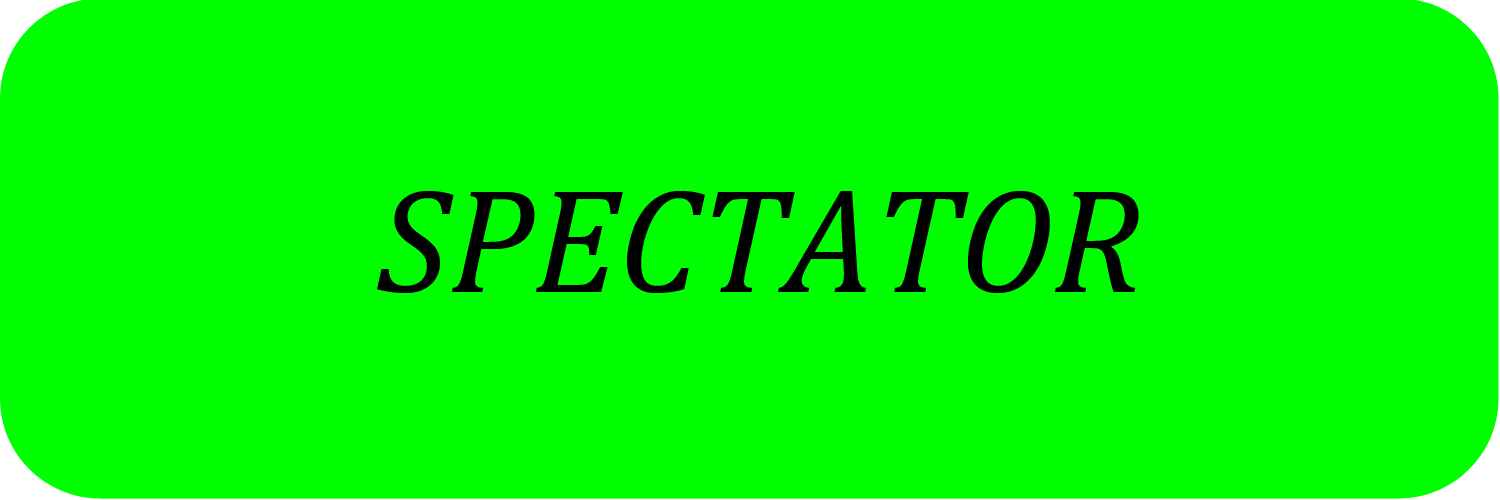
<style>
.page{position:relative;width:1500px;height:500px;background:#00ff00}
.page>*{position:absolute;margin:0}
.t1{font:150px "Cambria-Italic";color:#000000}
</style>
<div class="page">
<p class="t1" style="left:377px;top:191px;width:762px;height:102px">SPECTATOR</p>
</div>
